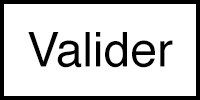
<style>
.page{position:relative;width:200px;height:100px;background:#ffffff}
.page>*{position:absolute;margin:0}
.t1{font:48px "Helvetica";color:#000000}
</style>
<div class="page">
<p class="t1" style="left:28px;top:32px;width:145px;height:36px">Valider</p>
</div>
